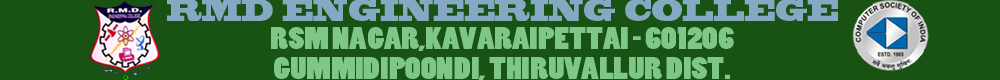
<style>
.page{position:relative;width:1000px;height:80px;background:#185314}
.page>*{position:absolute;margin:0}
.t1{font:29.1px "BlackoakStd";color:#85a9c3;scale:0.6 1}
.t2{font:29.6px "PoplarStd";color:#7ec788;scale:1.2 1}
</style>
<div class="page">
<p class="t1" style="left:167px;top:0px;width:671px;height:21px">RMD ENGINEERING COLLEGE</p>
<p class="t2" style="left:271px;top:27px;width:463px;height:24px">RSM NAGAR,KAVARAIPETTAI - 601206</p>
<p class="t2" style="left:274px;top:57px;width:456px;height:24px">GUMMIDIPOONDI, THIRUVALLUR DIST.</p>
</div>
